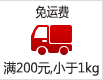
<style>
.page{position:relative;width:103px;height:80px;background:#ffffff}
.page>*{position:absolute;margin:0}
.t1{font:13px "MicrosoftYaHei";color:#302929;scale:0.86 1}
.t2{font:13px "MicrosoftYaHei";color:#302929;scale:0.95 1}
</style>
<div class="page">
<p class="t1" style="left:35px;top:5px;width:34px;height:14px">免运费</p>
<p class="t2" style="left:3px;top:61px;width:96px;height:15px">满200元,小于1kg</p>
</div>
